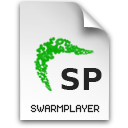
<style>
.page{position:relative;width:128px;height:128px;background:#ffffff}
.page>*{position:absolute;margin:0}
.t1{font:30px "BitstreamVeraSans-Bold";color:#252525}
.t2{font:9px "Volter(Goldfish)-Regular";color:#252525}
</style>
<div class="page">
<p class="t1" style="left:61px;top:68px;width:41px;height:22px">SP</p>
<p class="t2" style="left:30px;top:104px;width:70px;height:9px">SWARMPLAYER</p>
</div>
